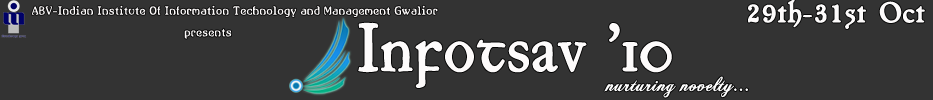
<style>
.page{position:relative;width:933px;height:100px;background:#333333}
.page>*{position:absolute;margin:0}
.t1{font:13px "AllHookedUp";color:#fdfbfb;font-weight:bold}
.t2{font:29px "ChelseaAlternates";color:#fdfbfb;font-weight:bold}
.t3{font:63px "JuniusIrish";color:#fdfbfb;font-weight:bold}
.t4{font:21px "ChopinScript";color:#fefefe;font-weight:bold}
</style>
<div class="page">
<p class="t1" style="left:32px;top:5px;width:406px;height:12px">ABV-Indian Institute Of Information Technology and Management Gwalior</p>
<p class="t2" style="left:748px;top:0px;width:177px;height:29px">29th-31st Oct</p>
<p class="t1" style="left:184px;top:28px;width:48px;height:11px">presents</p>
<p class="t3" style="left:358px;top:22px;width:314px;height:66px">Infotsav ’10</p>
<p class="t4" style="left:604px;top:76px;width:144px;height:22px">nurturing novelty...</p>
</div>
